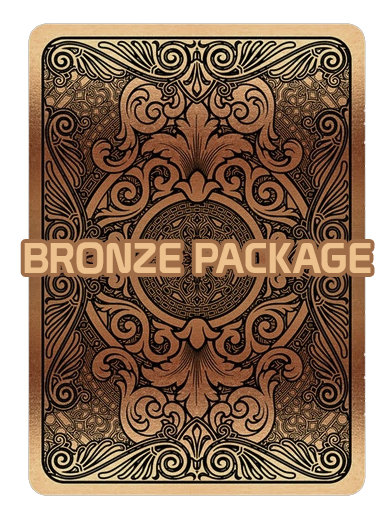
<style>
.page{position:relative;width:388px;height:517px;background:#ffffff}
.page>*{position:absolute;margin:0}
.t1{font:42px "Prototype";color:#edc18e}
</style>
<div class="page">
<p class="t1" style="left:24px;top:242px;width:347px;height:32px">BRONZE PACKAGE</p>
</div>
